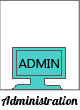
<style>
.page{position:relative;width:80px;height:110px;background:#ffffff}
.page>*{position:absolute;margin:0}
.t1{font:12.5px "LaoUI";letter-spacing:0.01em;color:#000000}
.t2{font:12.5px "Lobster1.4";letter-spacing:0.01em;color:#000000}
</style>
<div class="page">
<p class="t1" style="left:18px;top:59px;width:41px;height:9px">ADMIN</p>
<p class="t2" style="left:1px;top:96px;width:77px;height:10px">Administration</p>
</div>
